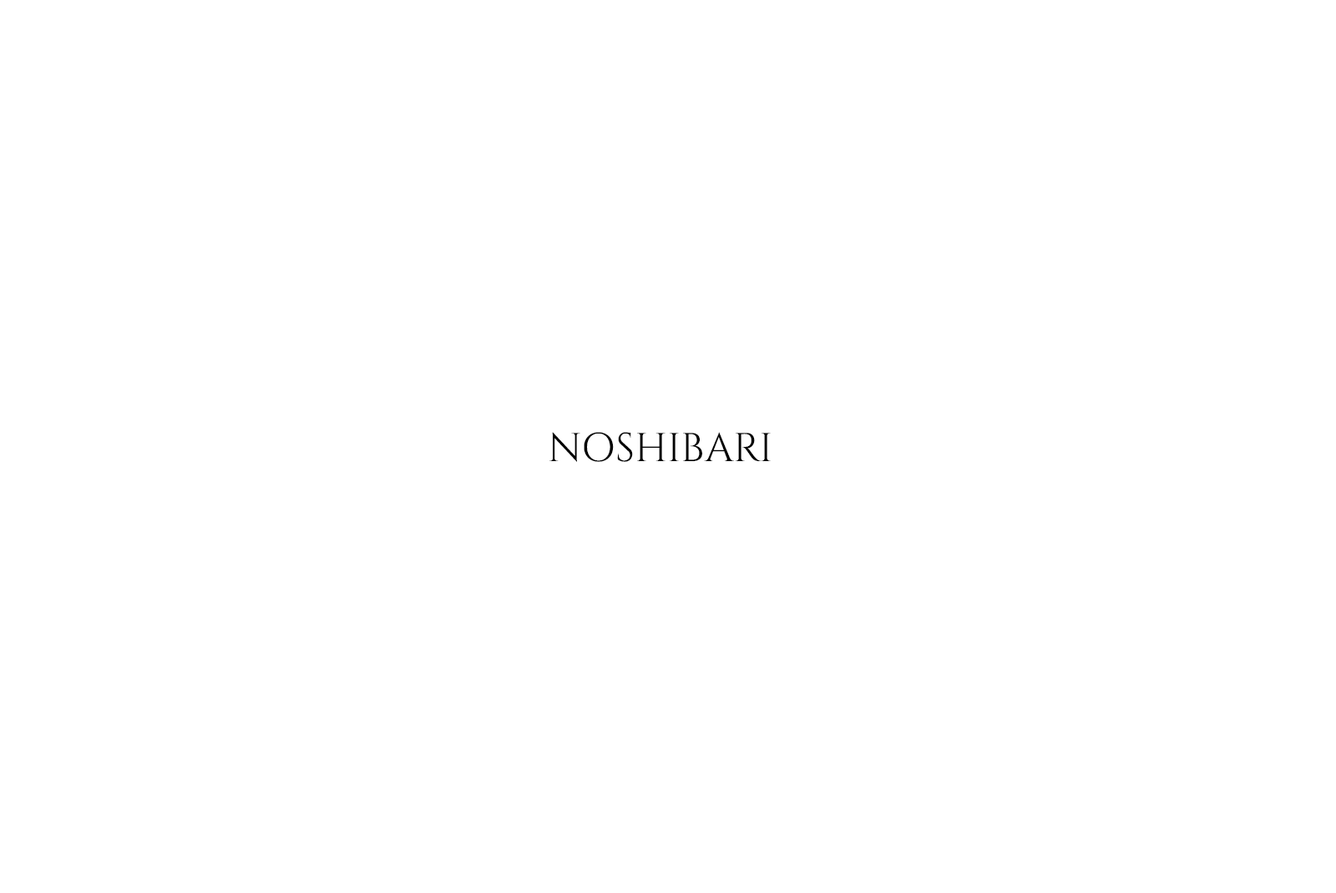
<style>
.page{position:relative;width:1336px;height:893px;background:#ffffff}
.page>*{position:absolute;margin:0}
.t1{font:40.4px "Cinzel-Regular";color:#000000;text-transform:uppercase}
</style>
<div class="page">
<p class="t1" style="left:549px;top:432px;width:222px;height:30px">NOSHIBARI</p>
</div>
